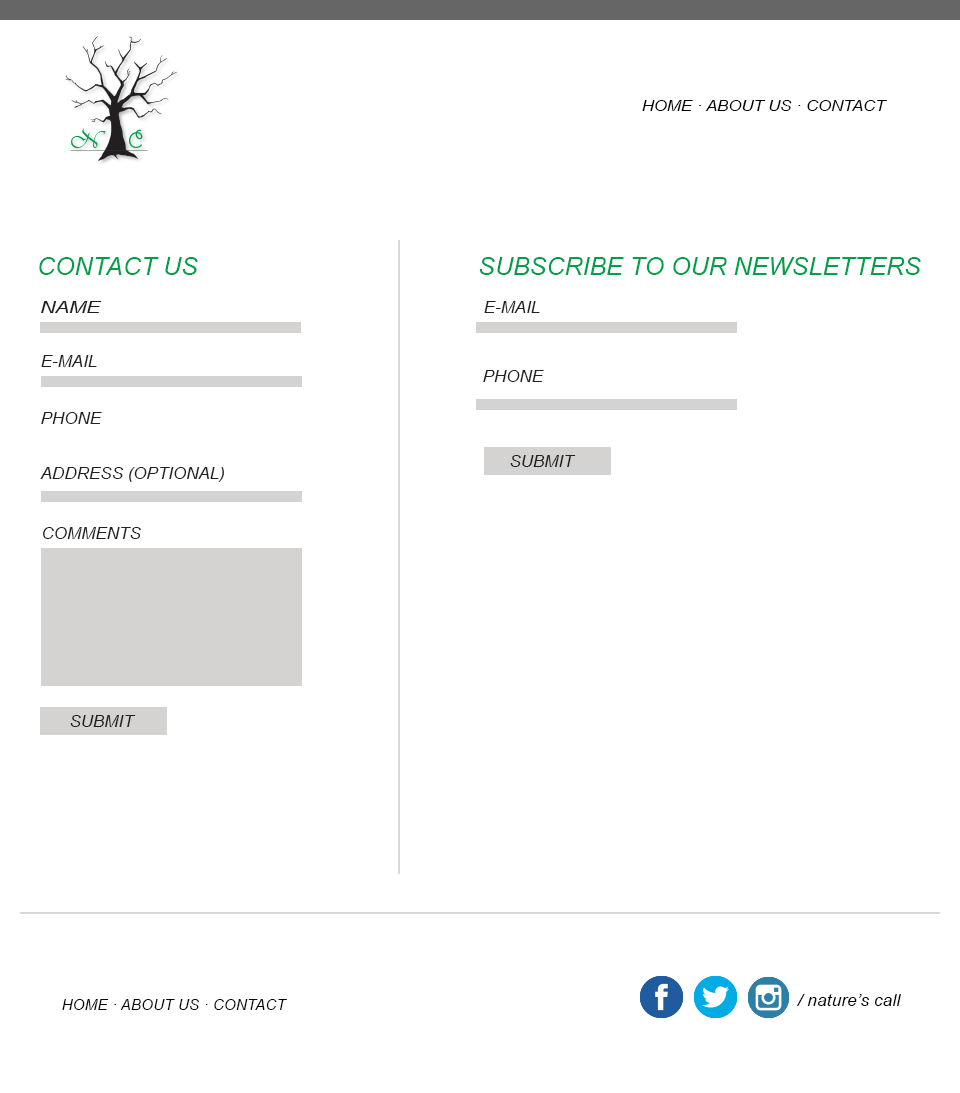
<style>
.page{position:relative;width:960px;height:1093px;background:#ffffff}
.page>*{position:absolute;margin:0}
.t1{font:15.3px "Arial-ItalicMT";color:#000000;scale:1.09 1}
.t2{font:25px "Arial-ItalicMT";color:#009f4b}
.t3{font:17px "Arial-ItalicMT";color:#231f20;scale:1.22 1}
.t4{font:17px "Arial-ItalicMT";color:#231f20}
.t5{font:15.3px "Arial-ItalicMT";color:#040404}
.t6{font:17.5px "Arial-ItalicMT";color:#000000}
</style>
<div class="page">
<p class="t1" style="left:642px;top:100px;width:245px;height:11px">HOME · ABOUT US · CONTACT</p>
<p class="t2" style="left:39px;top:257px;width:159px;height:18px">CONTACT US</p>
<p class="t2" style="left:479px;top:257px;width:442px;height:18px">SUBSCRIBE TO OUR NEWSLETTERS</p>
<p class="t3" style="left:41px;top:301px;width:61px;height:12px">NAME</p>
<p class="t4" style="left:484px;top:301px;width:56px;height:13px">E-MAIL</p>
<p class="t4" style="left:41px;top:355px;width:56px;height:13px">E-MAIL</p>
<p class="t4" style="left:483px;top:370px;width:61px;height:12px">PHONE</p>
<p class="t4" style="left:41px;top:412px;width:61px;height:12px">PHONE</p>
<p class="t4" style="left:510px;top:455px;width:66px;height:13px">SUBMIT</p>
<p class="t4" style="left:40px;top:467px;width:184px;height:15px">ADDRESS (OPTIONAL)</p>
<p class="t4" style="left:43px;top:527px;width:98px;height:13px">COMMENTS</p>
<p class="t4" style="left:70px;top:715px;width:66px;height:13px">SUBMIT</p>
<p class="t5" style="left:62px;top:999px;width:225px;height:11px">HOME · ABOUT US · CONTACT</p>
<p class="t6" style="left:797px;top:994px;width:104px;height:12px">/ nature’s call</p>
</div>
